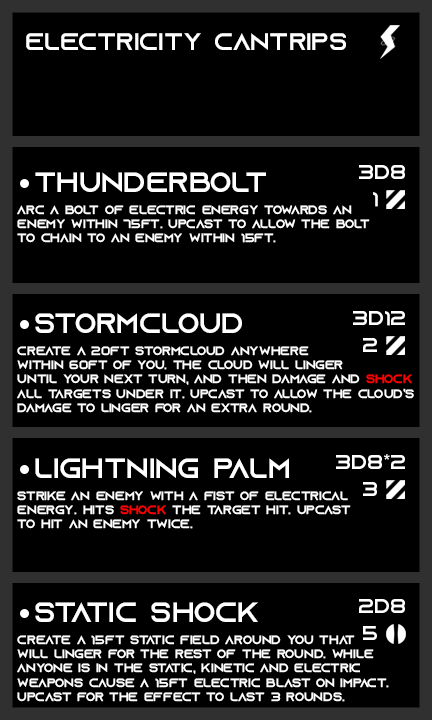
<style>
.page{position:relative;width:432px;height:720px;background:#000000}
.page>*{position:absolute;margin:0}
.t1{font:24px "AzonixRegular";color:#ffffff}
.t2{font:28px "AzonixRegular";color:#ffffff}
.t3{font:20px "AzonixRegular";color:#ffffff}
.t4{font:12px "AzonixRegular";color:#ffffff}
.t5{font:12px "AzonixRegular";color:#ff0000}
</style>
<div class="page">
<p class="t1" style="left:26px;top:33px;width:320px;height:17px">electricity cantrips</p>
<p class="t2" style="left:35px;top:172px;width:231px;height:20px">thunderbolt</p>
<p class="t3" style="left:359px;top:165px;width:46px;height:14px">3d8</p>
<p class="t3" style="left:373px;top:192px;width:5px;height:15px">1</p>
<p class="t4" style="left:17px;top:205px;width:353px;height:38px">arc a bolt of electric energy towards an<br>enemy within 75ft. upcast to allow the bolt<br>to chain to an enemy within 15ft.</p>
<p class="t2" style="left:35px;top:313px;width:207px;height:20px">stormcloud</p>
<p class="t3" style="left:353px;top:311px;width:52px;height:15px">3d12</p>
<p class="t3" style="left:363px;top:338px;width:14px;height:14px">2</p>
<p class="t4" style="left:17px;top:346px;width:397px;height:67px">create a 20ft stormcloud anywhere <br>within 60ft of you. the cloud will linger <br>until your next turn, and then damage and <span class="t5">shock<br></span>all targets under it. upcast to allow the cloud’s<br>damage to linger for an extra round.</p>
<p class="t2" style="left:35px;top:458px;width:254px;height:20px">lightning palm</p>
<p class="t3" style="left:336px;top:454px;width:69px;height:15px">3d8*2</p>
<p class="t3" style="left:363px;top:482px;width:14px;height:14px">3</p>
<p class="t4" style="left:17px;top:491px;width:334px;height:38px">strike an enemy with a fist of electrical<br>energy. hits <span class="t5">shock</span> the target hit. upcast<br>to hit an enemy twice.</p>
<p class="t2" style="left:35px;top:602px;width:223px;height:20px">static shock</p>
<p class="t3" style="left:359px;top:599px;width:46px;height:14px">2d8</p>
<p class="t3" style="left:363px;top:626px;width:14px;height:14px">5</p>
<p class="t4" style="left:17px;top:635px;width:372px;height:67px">create a 15ft static field around you that <br>will linger for the rest of the round. while<br>anyone is in the static, kinetic and electric <br>weapons cause a 15ft electric blast on impact. <br>upcast for the effect to last 3 rounds.</p>
</div>
